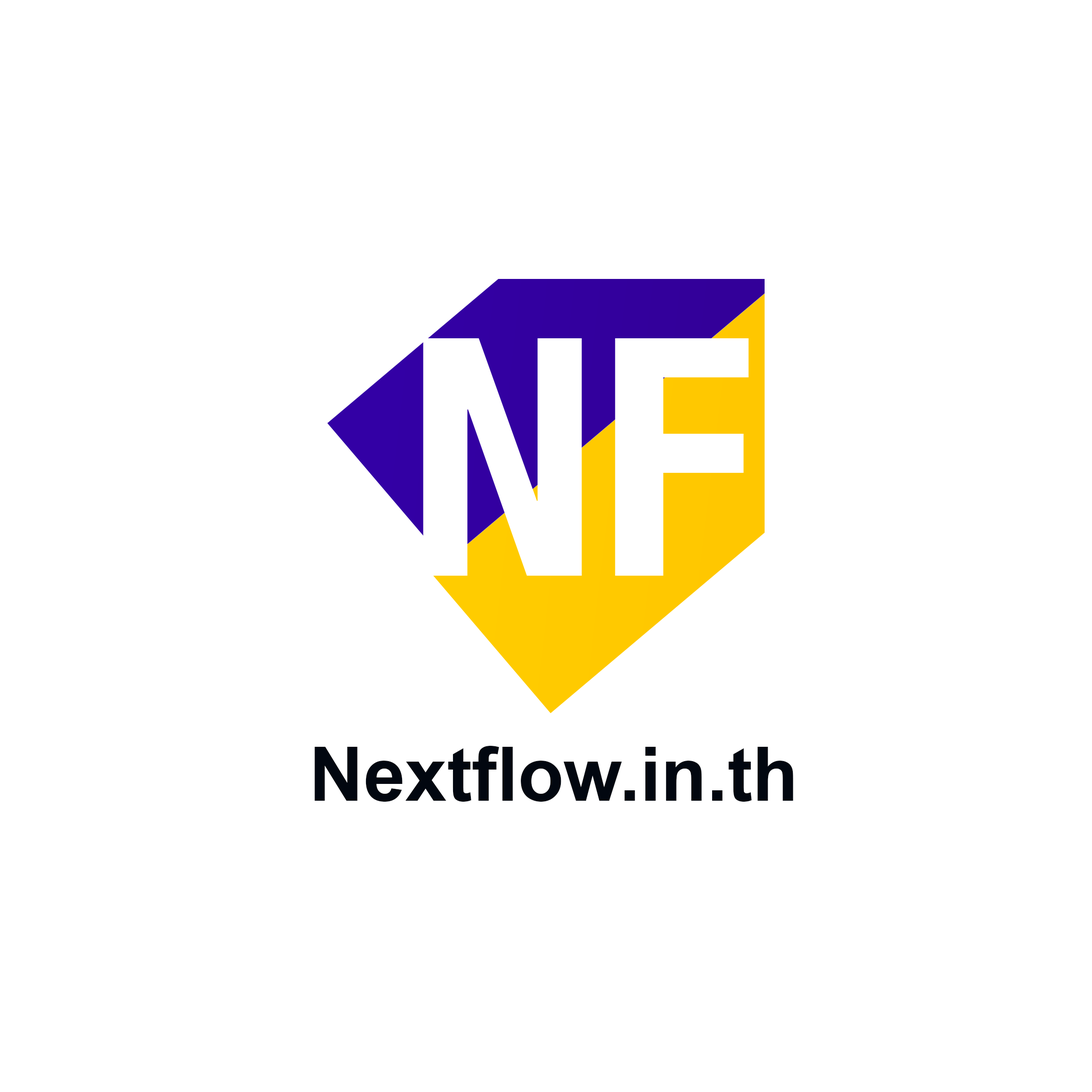
<style>
.page{position:relative;width:1092px;height:1092px;background:#ffffff}
.page>*{position:absolute;margin:0}
.t1{font:75px "Arial-BoldMT";color:#020710}
</style>
<div class="page">
<p class="t1" style="left:315px;top:746px;width:478px;height:56px">Nextflow.in.th</p>
</div>
